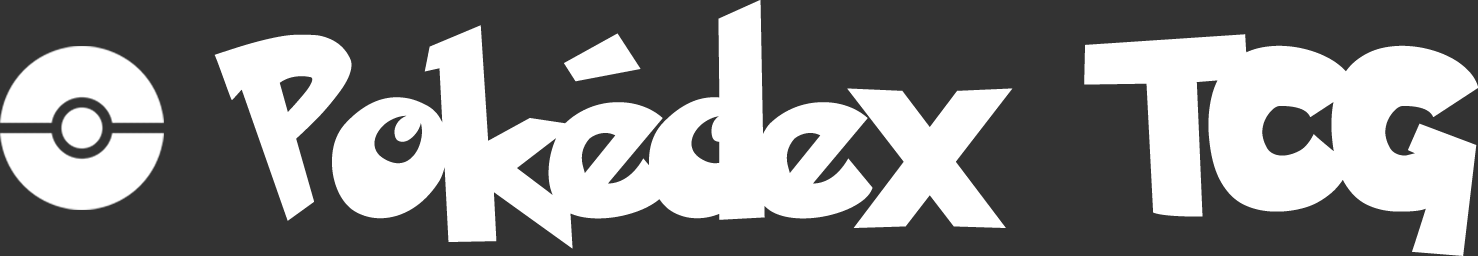
<style>
.page{position:relative;width:1478px;height:256px;background:#333333}
.page>*{position:absolute;margin:0}
.t1{font:204.8px "PokemonSolidNormal";color:#ffffff}
</style>
<div class="page">
<p class="t1" style="left:214px;top:0px;width:1264px;height:256px">Pokédex TCG</p>
</div>
